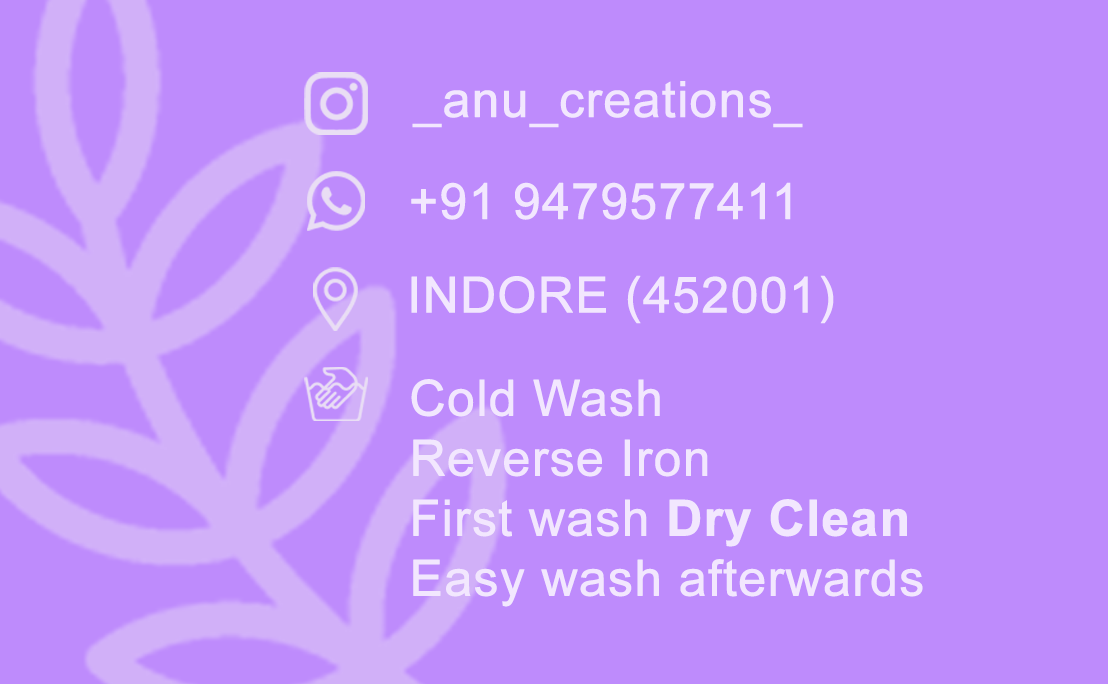
<style>
.page{position:relative;width:1108px;height:684px;background:#be8bfc}
.page>*{position:absolute;margin:0}
.t1{font:50px "ArialMT";color:#f2e7fe;font-weight:bold}
.t2{font:50px "Arial-BoldMT";color:#f2e7fe;font-weight:bold}
</style>
<div class="page">
<p class="t1" style="left:412px;top:81px;width:391px;height:47px">_anu_creations_</p>
<p class="t1" style="left:411px;top:182px;width:380px;height:38px">+91 9479577411</p>
<p class="t1" style="left:411px;top:275px;width:423px;height:49px">INDORE (452001)</p>
<p class="t1" style="left:411px;top:379px;width:512px;height:228px">Cold Wash<br>Reverse Iron<br>First wash <span class="t2">Dry Clean<br></span>Easy wash afterwards</p>
</div>
